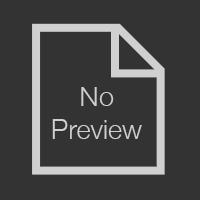
<style>
.page{position:relative;width:200px;height:200px;background:#333333}
.page>*{position:absolute;margin:0}
.t1{font:27.2px "HelveticaNeue-Light";color:#cfcfcf}
</style>
<div class="page">
<p class="t1" style="left:52px;top:87px;width:90px;height:52px;text-align:center">No<br>Preview</p>
</div>
